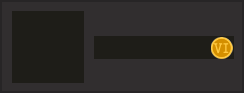
<style>
.page{position:relative;width:244px;height:93px;background:#312e2f}
.page>*{position:absolute;margin:0}
.t1{font:13.8px "Gungsuh";color:#ffc840}
</style>
<div class="page">
<p class="t1" style="left:214px;top:43px;width:15px;height:11px">VI</p>
</div>
